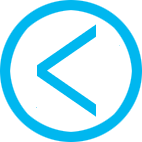
<style>
.page{position:relative;width:142px;height:142px;background:#ffffff}
.page>*{position:absolute;margin:0}
.t1{font:82.5px "Orbitron-Medium";color:#00b7ef;scale:1.19 1}
</style>
<div class="page">
<p class="t1" style="left:37px;top:24px;width:59px;height:93px;rotate:90deg">V</p>
</div>
